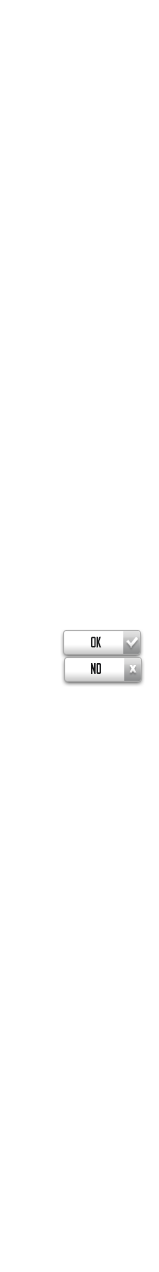
<style>
.page{position:relative;width:159px;height:1272px;background:#ffffff}
.page>*{position:absolute;margin:0}
.t1{font:14px "AgencyFB-Bold";color:#191a1c;text-transform:uppercase;scale:0.82 1}
.t2{font:9.9px "Arial-Black";color:#ffffff;text-transform:uppercase;scale:0.82 1}
</style>
<div class="page">
<p class="t1" style="left:91px;top:636px;width:11px;height:12px">ok</p>
<p class="t1" style="left:91px;top:663px;width:10px;height:11px">No</p>
<p class="t2" style="left:129px;top:665px;width:8px;height:8px">x</p>
</div>
